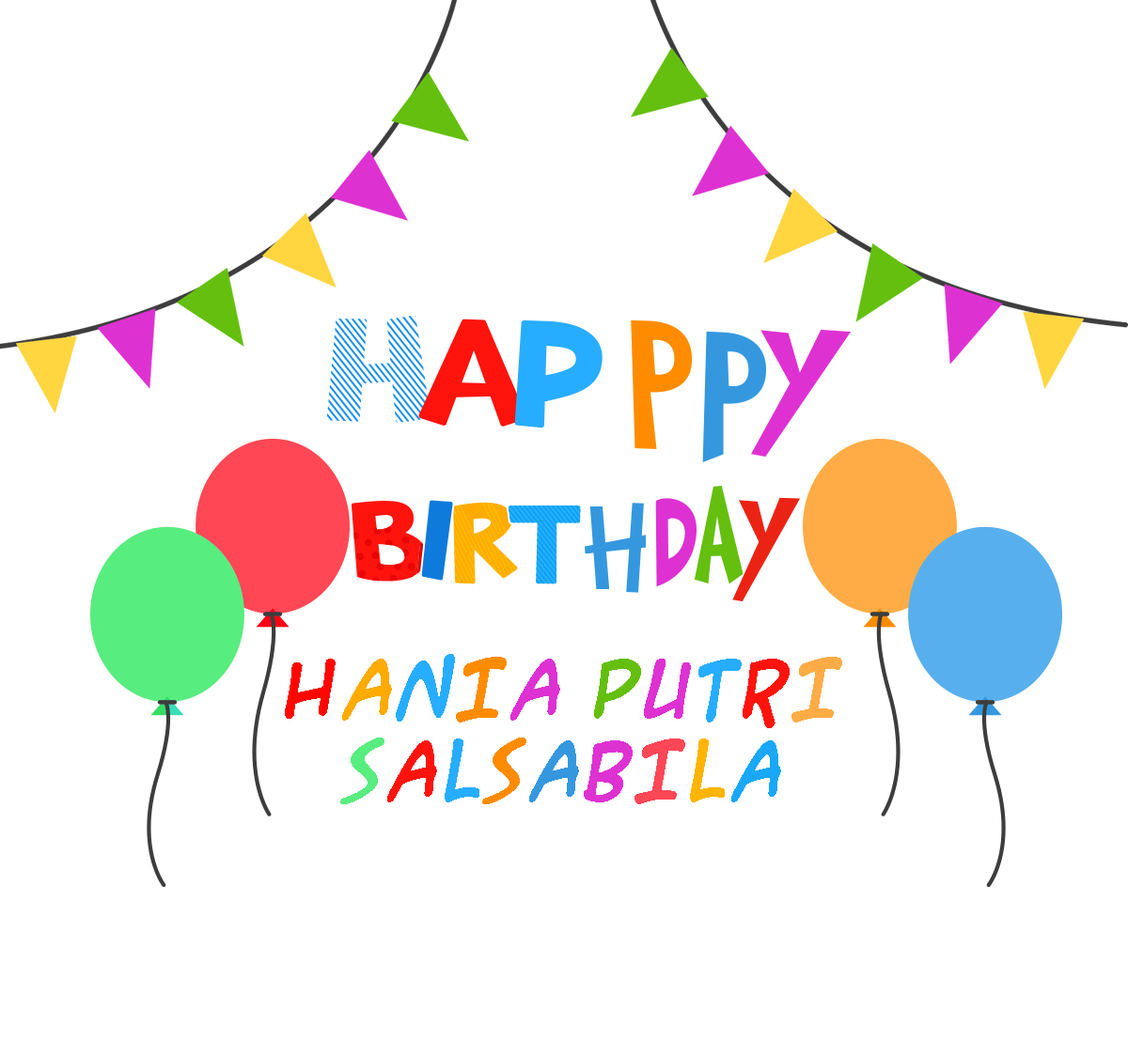
<style>
.page{position:relative;width:1128px;height:1057px;background:#ffffff}
.page>*{position:absolute;margin:0}
.t1{font:67.7px "ACMESecretAgentBold";color:#ff0600}
.t2{font:67.7px "ACMESecretAgentBold";color:#ffab00}
.t3{font:67.7px "ACMESecretAgentBold";color:#27adff}
.t4{font:67.7px "ACMESecretAgentBold";color:#ff8c00}
.t5{font:67.7px "ACMESecretAgentBold";color:#de31d2}
.t6{font:67.7px "ACMESecretAgentBold";color:#64bf0f}
.t7{font:67.7px "ACMESecretAgentBold";color:#ff130d}
.t8{font:67.7px "ACMESecretAgentBold";color:#ffac47}
.t9{font:67.7px "ACMESecretAgentBold";color:#58ed7f}
.t10{font:67.7px "ACMESecretAgentBold";color:#3598de}
.t11{font:67.7px "ACMESecretAgentBold";color:#ff4756}
.t12{font:67.7px "ACMESecretAgentBold";color:#ffb400}
.t13{font:67.7px "ACMESecretAgentBold";color:#19a8f8;text-transform:uppercase}
</style>
<div class="page">
<p class="t1" style="left:285px;top:654px;width:557px;height:150px;text-align:center">H<span class="t2">A</span><span class="t3">N</span><span class="t4">I</span><span class="t5">A </span><span class="t6">P</span><span class="t5">U</span><span class="t3">T</span><span class="t7">R</span><span class="t8">I <br></span><span class="t9">S</span><span class="t7">A</span><span class="t3">L</span><span class="t4">S</span><span class="t10">A</span><span class="t5">B</span><span class="t11">I</span><span class="t12">L</span><span class="t13">A</span></p>
</div>
